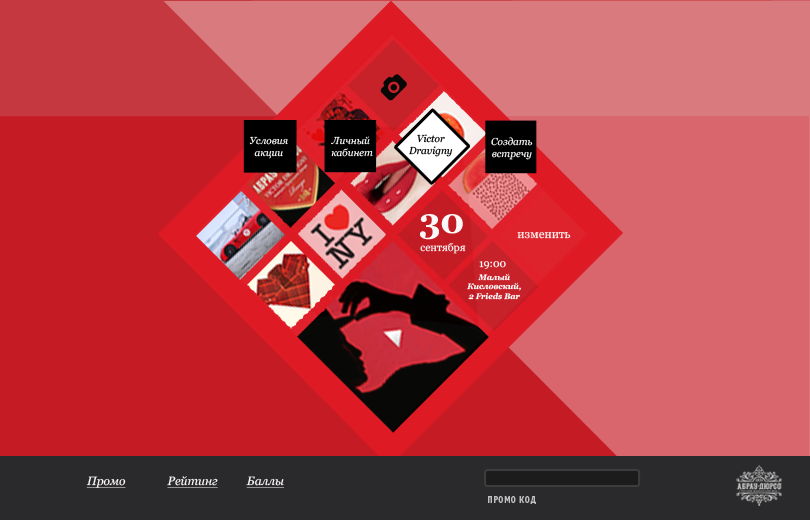
<style>
.page{position:relative;width:810px;height:520px;background:#c51b24}
.page>*{position:absolute;margin:0}
.t1{font:10px "Georgia-Italic";color:#ffffff}
.t2{font:10px "Georgia-Italic";color:#000000}
.t3{font:35px "Georgia-Bold";color:#ffffff}
.t4{font:11.9px "Georgia";color:#ffffff}
.t5{font:10.7px "Georgia";color:#ffffff}
.t6{font:8px "Georgia-BoldItalic";color:#ffffff}
.t7{font:12px "Georgia-Italic";color:#fef9f9;text-decoration:underline}
.t8{font:10px "NewLetterGothicC-Bold";letter-spacing:0.02em;color:#c0bfc0;text-transform:uppercase}
</style>
<div class="page">
<p class="t1" style="left:249px;top:136px;width:39px;height:23px;text-align:center">Условия <br>акции</p>
<p class="t1" style="left:331px;top:136px;width:42px;height:21px;text-align:center">Личный<br> кабинет</p>
<p class="t2" style="left:409px;top:134px;width:44px;height:23px;text-align:center">Victor <br>Dravigny</p>
<p class="t1" style="left:491px;top:137px;width:42px;height:23px;text-align:center">Создать<br>встречу</p>
<p class="t3" style="left:420px;top:214px;width:43px;height:26px">30</p>
<p class="t4" style="left:517px;top:232px;width:54px;height:7px">изменить</p>
<p class="t5" style="left:420px;top:243px;width:46px;height:11px">сентября</p>
<p class="t5" style="left:479px;top:261px;width:27px;height:8px">19:00</p>
<p class="t6" style="left:467px;top:273px;width:54px;height:27px;text-align:center">Малый<br>Кисловский, <br>2 Frieds Bar</p>
<p class="t7" style="left:86px;top:476px;width:40px;height:12px">Промо</p>
<p class="t7" style="left:167px;top:476px;width:51px;height:12px">Рейтинг</p>
<p class="t7" style="left:246px;top:476px;width:38px;height:12px">Баллы</p>
<p class="t8" style="left:488px;top:496px;width:48px;height:8px">Промо код</p>
</div>
